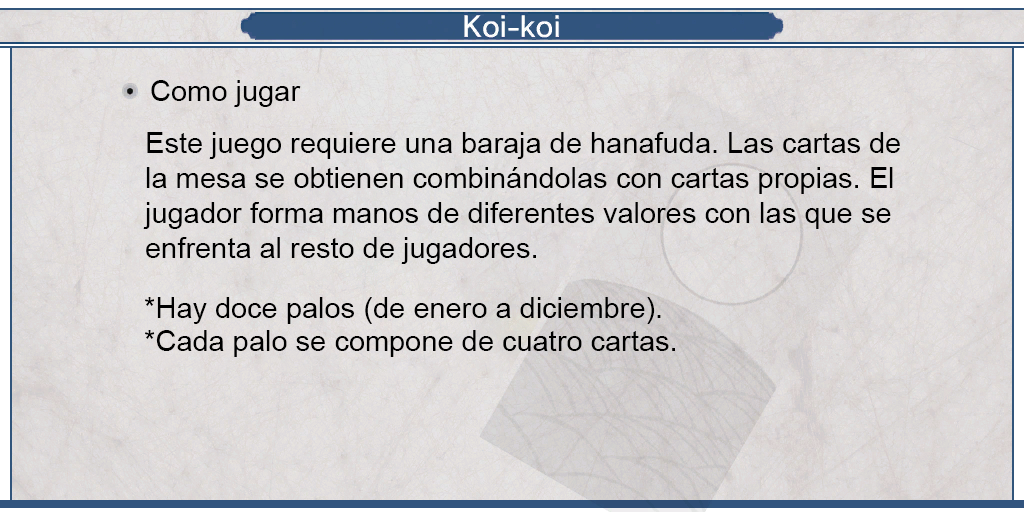
<style>
.page{position:relative;width:1024px;height:512px}
.page>*{position:absolute;margin:0}
.t1{font:29px "ArialMT";color:#000000}
.t2{font:29px/33px "ArialMT";color:#000000}
</style>
<div class="page">
<p class="t1" style="left:151px;top:80px;width:150px;height:27px">Como jugar</p>
<p class="t1" style="left:143px;top:132px;width:757px;height:132px;text-align:justify">Este juego requiere una baraja de hanafuda. Las cartas de<br>la mesa se obtienen combinándolas con cartas propias. El<br>jugador forma manos de diferentes valores con las que se<br>enfrenta al resto de jugadores.</p>
<p class="t2" style="left:145px;top:297px;width:530px;height:60px;text-align:justify">*Hay doce palos (de enero a diciembre).<br>*Cada palo se compone de cuatro cartas.</p>
</div>
